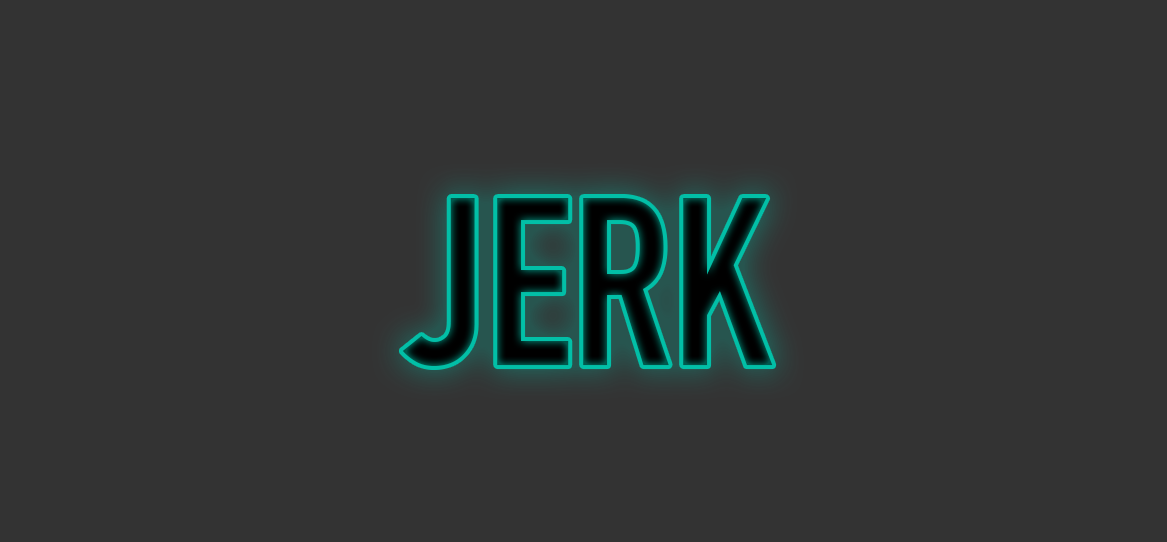
<style>
.page{position:relative;width:1167px;height:542px;background:#333333}
.page>*{position:absolute;margin:0}
.t1{font:233.7px "DINEngschrift";text-transform:uppercase}
</style>
<div class="page">
<p class="t1" style="left:402px;top:198px;width:371px;height:168px">jerk</p>
</div>
